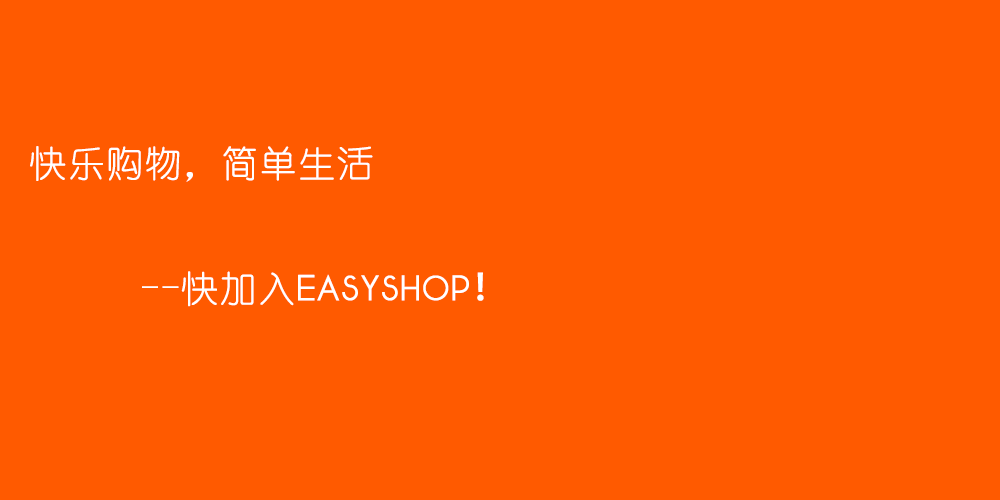
<style>
.page{position:relative;width:1000px;height:500px;background:#ff5a00}
.page>*{position:absolute;margin:0}
.t1{font:36px "YouYuan";letter-spacing:0.04em;color:#ffffff;font-weight:bold}
.t2{font:36px "phantom-light";letter-spacing:0.04em;color:#ffffff;font-weight:bold}
.t3{font:36px "AdobeHeitiStd-Regular";letter-spacing:0.04em;color:#ffffff;font-weight:bold}
</style>
<div class="page">
<p class="t1" style="left:30px;top:146px;width:343px;height:36px">快乐购物，简单生活</p>
<p class="t2" style="left:142px;top:271px;width:342px;height:36px"><span class="t1">--快加入</span>Easyshop<span class="t3">！</span></p>
</div>
